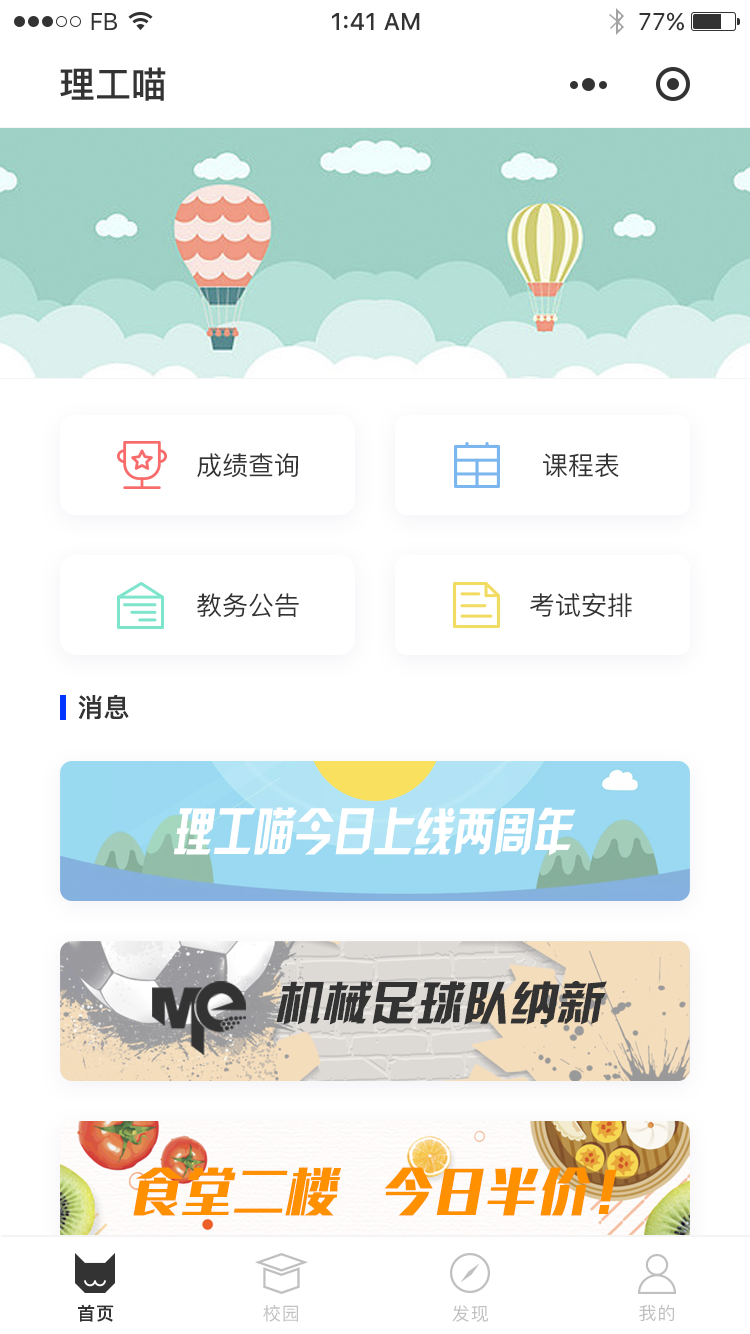
<style>
.page{position:relative;width:750px;height:1334px;background:#ffffff}
.page>*{position:absolute;margin:0}
.t1{font:24px "SFUIText-Regular";letter-spacing:-0.025em;color:#333333}
.t2{font:24px "SFUIText-Medium";color:#333333}
.t3{font:24px "SFUIText-Regular";color:#333333}
.t4{font:36px "PingFangSC-Medium";color:#333333}
.t5{font:26px "PingFangSC-Regular";color:#333333}
.t6{font:26px "PingFangSC-Medium";color:#333333}
.t7{font:51.5px "HYk2gj";color:#ffffff;font-style:italic;scale:0.78 1}
.t8{font:46.7px "HYk2gj";color:#333333;font-style:italic}
.t9{font:52.3px "HYHeiFangW";color:#ff9000;font-style:italic}
.t10{font:18px "PingFangSC-Medium";letter-spacing:0.05em;color:#333333}
.t11{font:18px "PingFangSC-Regular";letter-spacing:0.05em;color:#c0c0c0}
</style>
<div class="page">
<p class="t1" style="left:91px;top:13px;width:26px;height:17px">FB</p>
<p class="t2" style="left:332px;top:13px;width:88px;height:17px">1:41 AM</p>
<p class="t3" style="left:639px;top:12px;width:45px;height:19px">77%</p>
<p class="t4" style="left:60px;top:67px;width:106px;height:34px">理工喵</p>
<p class="t5" style="left:197px;top:453px;width:101px;height:25px">成绩查询</p>
<p class="t5" style="left:543px;top:453px;width:76px;height:24px">课程表</p>
<p class="t5" style="left:197px;top:593px;width:102px;height:25px">教务公告</p>
<p class="t5" style="left:530px;top:593px;width:102px;height:24px">考试安排</p>
<p class="t6" style="left:78px;top:694px;width:51px;height:26px">消息</p>
<p class="t7" style="left:174px;top:807px;width:402px;height:49px">理工喵今日上线两周年</p>
<p class="t8" style="left:276px;top:981px;width:331px;height:44px">机械足球队纳新</p>
<p class="t9" style="left:133px;top:1167px;width:484px;height:49px">食堂二楼  今日半价！</p>
<p class="t10" style="left:78px;top:1304px;width:36px;height:18px">首页</p>
<p class="t11" style="left:263px;top:1304px;width:35px;height:18px">校园</p>
<p class="t11" style="left:452px;top:1305px;width:36px;height:17px">发现</p>
<p class="t11" style="left:639px;top:1304px;width:35px;height:17px">我的</p>
</div>
